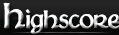
<style>
.page{position:relative;width:119px;height:35px}
.page>*{position:absolute;margin:0}
.t1{font:33.3px "Martel";font-variant:small-caps}
</style>
<div class="page">
<p class="t1" style="left:3px;top:2px;width:118px;height:32px">Highscore</p>
</div>
